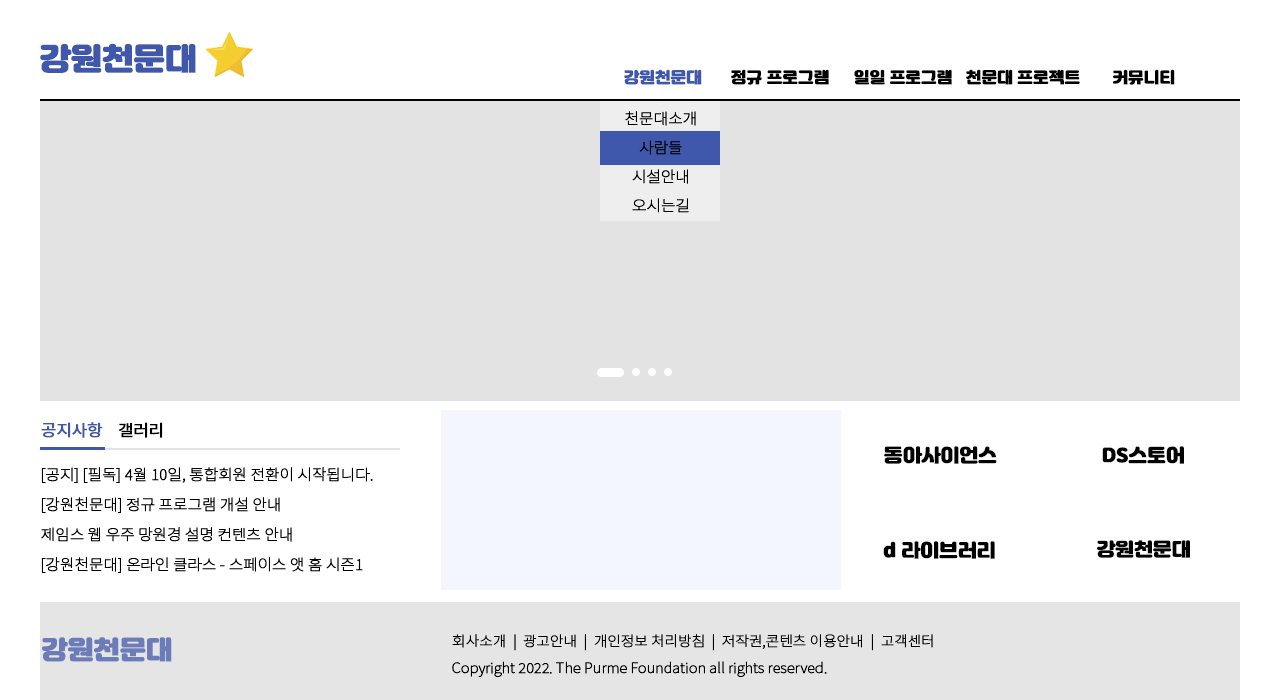
<style>
.page{position:relative;width:1281px;height:700px;background:#e3e3e3}
.page>*{position:absolute;margin:0}
.t1{font:30.3px "Jalnan";letter-spacing:-0.02em;color:#3f58ac;font-weight:bold}
.t2{font:15.2px "Jalnan";letter-spacing:-0.02em;color:#3f58ac;font-weight:bold}
.t3{font:15.2px "Jalnan";letter-spacing:-0.02em;color:#000000;font-weight:bold}
.t4{font:15.2px/29px "NotoSansKR-Thin";letter-spacing:-0.02em;color:#000000;font-weight:bold}
.t5{font:16.2px "NotoSansKR-Regular";letter-spacing:-0.02em;color:#3f58ac;font-weight:bold}
.t6{font:16.2px "NotoSansKR-Regular";letter-spacing:-0.02em;color:#000000;font-weight:bold}
.t7{font:18.2px "Jalnan";letter-spacing:-0.02em;color:#000000;font-weight:bold}
.t8{font:15.2px/30px "NotoSansKR-Thin";letter-spacing:-0.02em;color:#000000;font-weight:bold}
.t9{font:25.2px "Jalnan";letter-spacing:-0.02em;color:#6c7cb8;font-weight:bold}
.t10{font:14.1px "NotoSansKR-Thin";letter-spacing:-0.02em;color:#000000;font-weight:bold}
</style>
<div class="page">
<p class="t1" style="left:40px;top:43px;width:156px;height:30px">강원천문대</p>
<p class="t2" style="left:624px;top:69px;width:78px;height:16px">강원천문대</p>
<p class="t3" style="left:731px;top:69px;width:98px;height:16px">정규 프로그램</p>
<p class="t3" style="left:854px;top:69px;width:98px;height:16px">일일 프로그램</p>
<p class="t3" style="left:966px;top:69px;width:114px;height:16px">천문대 프로젝트</p>
<p class="t3" style="left:1113px;top:69px;width:62px;height:16px">커뮤니티</p>
<p class="t4" style="left:625px;top:111px;width:71px;height:102px;text-align:center">천문대소개<br>사람들<br>시설안내<br>오시는길</p>
<p class="t5" style="left:41px;top:422px;width:62px;height:16px">공지사항</p>
<p class="t6" style="left:118px;top:422px;width:45px;height:16px">갤러리</p>
<p class="t7" style="left:884px;top:446px;width:113px;height:18px">동아사이언스</p>
<p class="t7" style="left:1102px;top:446px;width:82px;height:18px">DS스토어</p>
<p class="t8" style="left:41px;top:467px;width:332px;height:106px">[공지] [필독] 4월 10일, 통합회원 전환이 시작됩니다.  <br> [강원천문대] 정규 프로그램 개설 안내 <br> 제임스 웹 우주 망원경 설명 컨텐츠 안내<br> [강원천문대] 온라인 클라스 - 스페이스 앳 홈 시즌1</p>
<p class="t7" style="left:883px;top:541px;width:112px;height:18px">d 라이브러리</p>
<p class="t7" style="left:1097px;top:540px;width:93px;height:18px">강원천문대</p>
<p class="t9" style="left:42px;top:637px;width:130px;height:25px">강원천문대</p>
<p class="t10" style="left:452px;top:634px;width:481px;height:17px">회사소개 　|  광고안내  |  개인정보 처리방침  |  저작권,콘텐츠 이용안내  |  고객센터</p>
<p class="t10" style="left:452px;top:661px;width:375px;height:16px">Copyright 2022. The Purme Foundation all rights reserved.</p>
</div>
